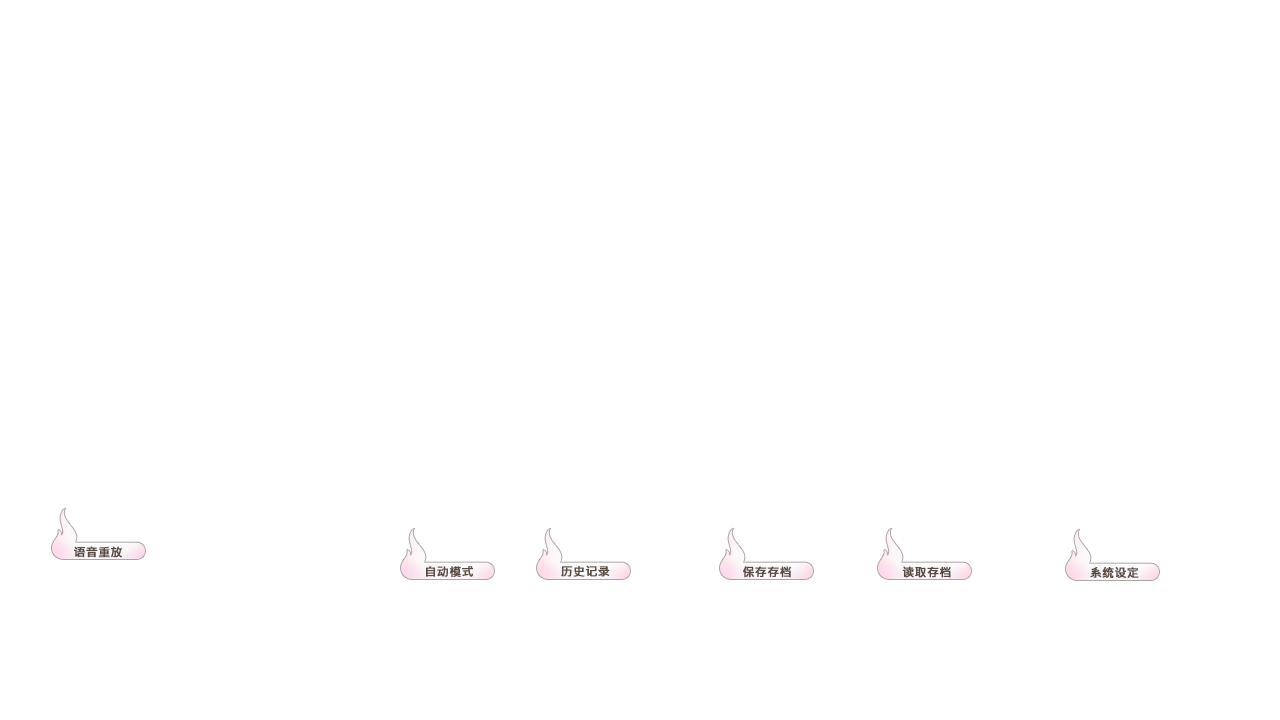
<style>
.page{position:relative;width:1280px;height:720px;background:#ffffff}
.page>*{position:absolute;margin:0}
.t1{font:12px "MicrosoftJhengHeiBold";color:#59493f;font-weight:bold}
</style>
<div class="page">
<p class="t1" style="left:74px;top:546px;width:48px;height:12px">语音重放</p>
<p class="t1" style="left:426px;top:566px;width:47px;height:11px">自动模式</p>
<p class="t1" style="left:561px;top:565px;width:49px;height:12px">历史记录</p>
<p class="t1" style="left:743px;top:566px;width:48px;height:12px">保存存档</p>
<p class="t1" style="left:902px;top:566px;width:49px;height:12px">读取存档</p>
<p class="t1" style="left:1090px;top:567px;width:49px;height:11px">系统设定</p>
</div>
